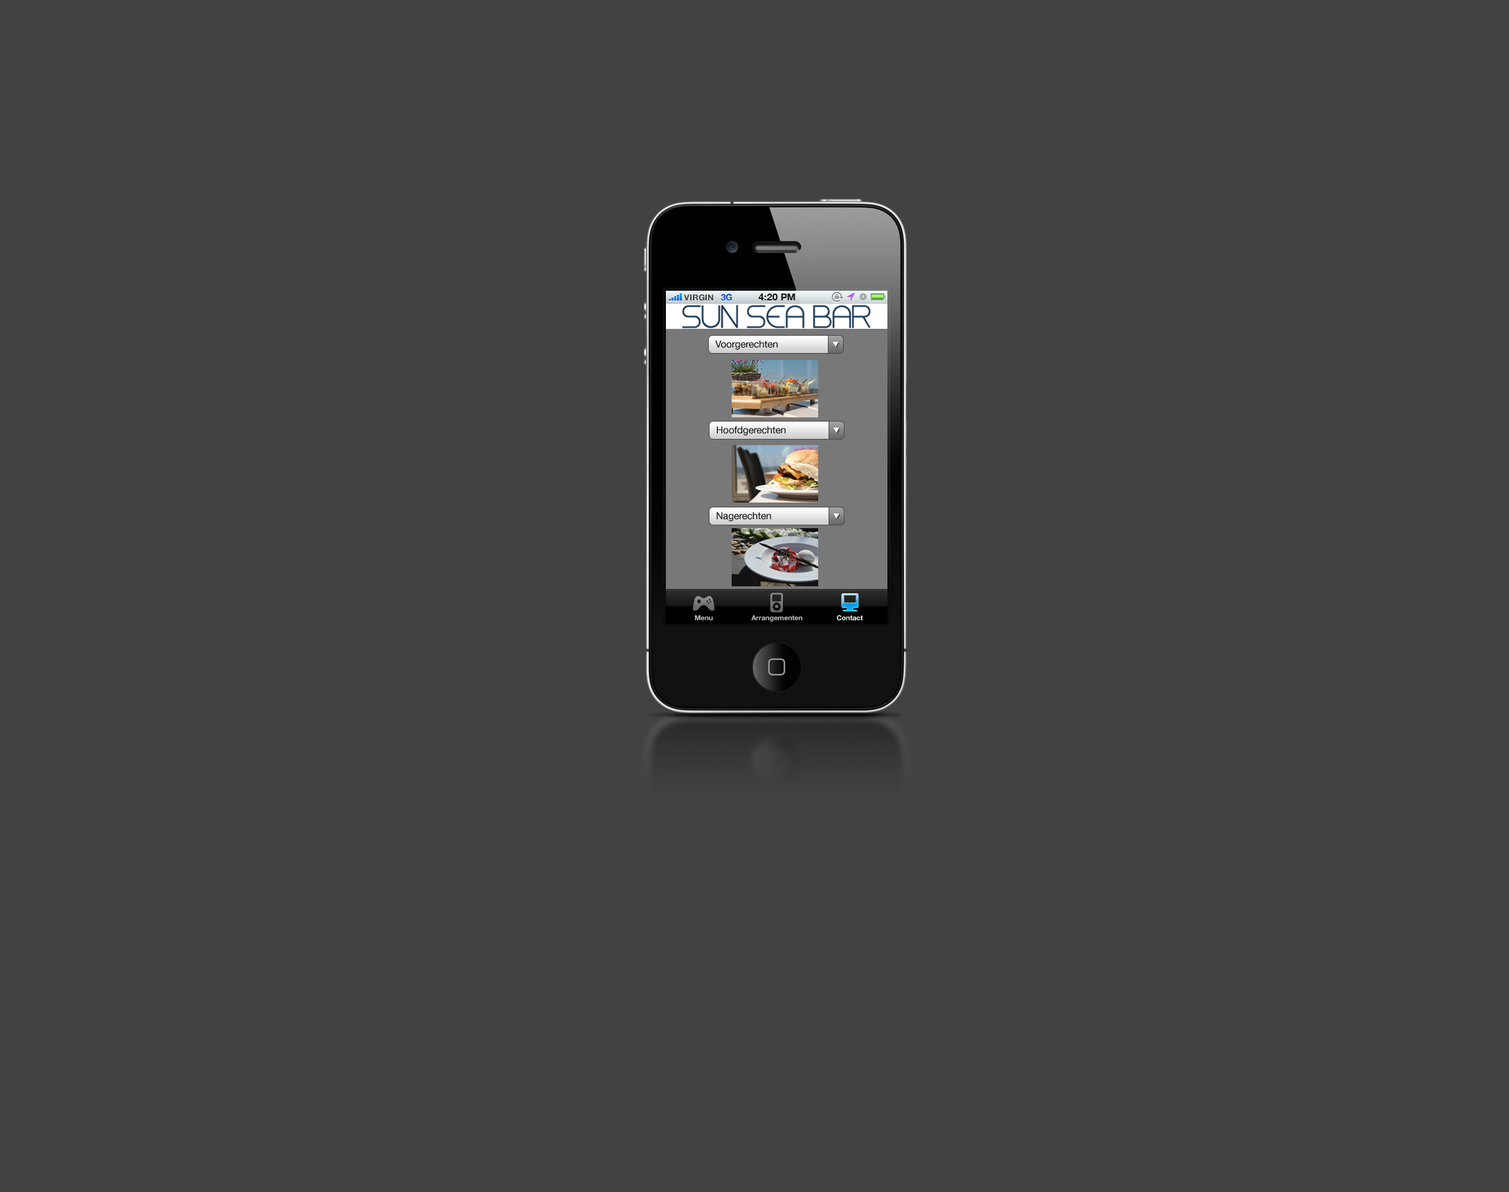
<style>
.page{position:relative;width:1509px;height:1192px;background:#424242}
.page>*{position:absolute;margin:0}
.t1{font:9px "HelveticaNeue-Bold";text-transform:uppercase}
.t2{font:9px "HelveticaNeue-Bold";color:#0c54c5;text-transform:uppercase}
.t3{font:9.7px "HelveticaNeue-Bold";color:#1a1b1b;text-transform:uppercase}
.t4{font:8.3px "HelveticaNeue-Bold";color:#404040;text-transform:uppercase}
.t5{font:9.7px "HelveticaNeue";color:#090909}
.t6{font:6.9px "HelveticaNeue-Bold";color:#c6c6c5}
.t7{font:6.9px "HelveticaNeue-Bold";color:#ffffff}
</style>
<div class="page">
<p class="t1" style="left:684px;top:294px;width:30px;height:7px">VIRGIN</p>
<p class="t2" style="left:721px;top:294px;width:11px;height:7px">3G</p>
<p class="t2" style="left:721px;top:294px;width:11px;height:7px">3G</p>
<p class="t3" style="left:758px;top:294px;width:37px;height:6px">4:20 PM</p>
<p class="t4" style="left:684px;top:294px;width:30px;height:7px">VIRGIN</p>
<p class="t5" style="left:715px;top:341px;width:63px;height:9px">Voorgerechten</p>
<p class="t5" style="left:717px;top:426px;width:69px;height:9px">Hoofdgerechten</p>
<p class="t5" style="left:717px;top:512px;width:54px;height:9px">Nagerechten</p>
<p class="t6" style="left:695px;top:615px;width:18px;height:5px">Menu</p>
<p class="t6" style="left:751px;top:615px;width:51px;height:7px">Arrangementen</p>
<p class="t7" style="left:837px;top:615px;width:26px;height:6px">Contact</p>
</div>
